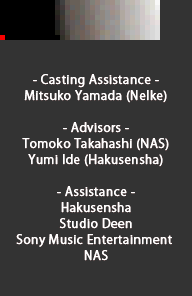
<style>
.page{position:relative;width:192px;height:296px;background:#333333}
.page>*{position:absolute;margin:0}
.t1{font:12px/16px "KozGoPr6N-Regular";letter-spacing:0.025em;color:#ffffff;font-weight:bold}
</style>
<div class="page">
<p class="t1" style="left:16px;top:74px;width:156px;height:187px;text-align:center">- Casting Assistance -<br>Mitsuko Yamada (Nelke)<br><br>- Advisors -<br>Tomoko Takahashi (NAS)<br>Yumi Ide (Hakusensha)<br><br>- Assistance -<br>Hakusensha<br>Studio Deen<br>Sony Music Entertainment <br>NAS</p>
</div>
